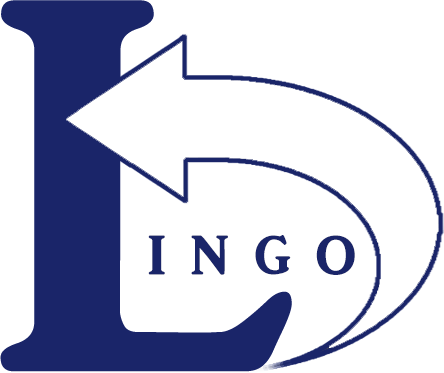
<style>
.page{position:relative;width:444px;height:373px;background:#ffffff}
.page>*{position:absolute;margin:0}
.t1{font:72px "ARJULIAN";letter-spacing:0.35em;color:#1a2569}
</style>
<div class="page">
<p class="t1" style="left:148px;top:235px;width:207px;height:40px">ingo</p>
</div>
